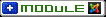
<style>
.page{position:relative;width:106px;height:17px;background:#ffffff}
.page>*{position:absolute;margin:0}
.t1{font:14px "Aston-F1";color:#26760e}
</style>
<div class="page">
<p class="t1" style="left:21px;top:5px;width:63px;height:7px">module</p>
</div>
